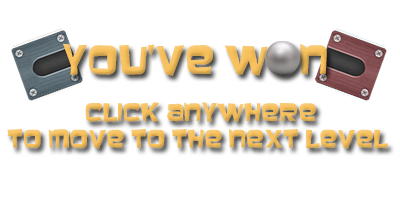
<style>
.page{position:relative;width:400px;height:200px;background:#ffffff}
.page>*{position:absolute;margin:0}
.t1{font:36.2px "Baveuse";color:#f7c05b}
.t2{font:22.2px "Baveuse";color:#f7c05b}
</style>
<div class="page">
<p class="t1" style="left:63px;top:43px;width:264px;height:33px">YOU’ve W   n</p>
<p class="t2" style="left:7px;top:102px;width:381px;height:47px;text-align:center">Click anywhere<br>to move to the next level</p>
</div>
